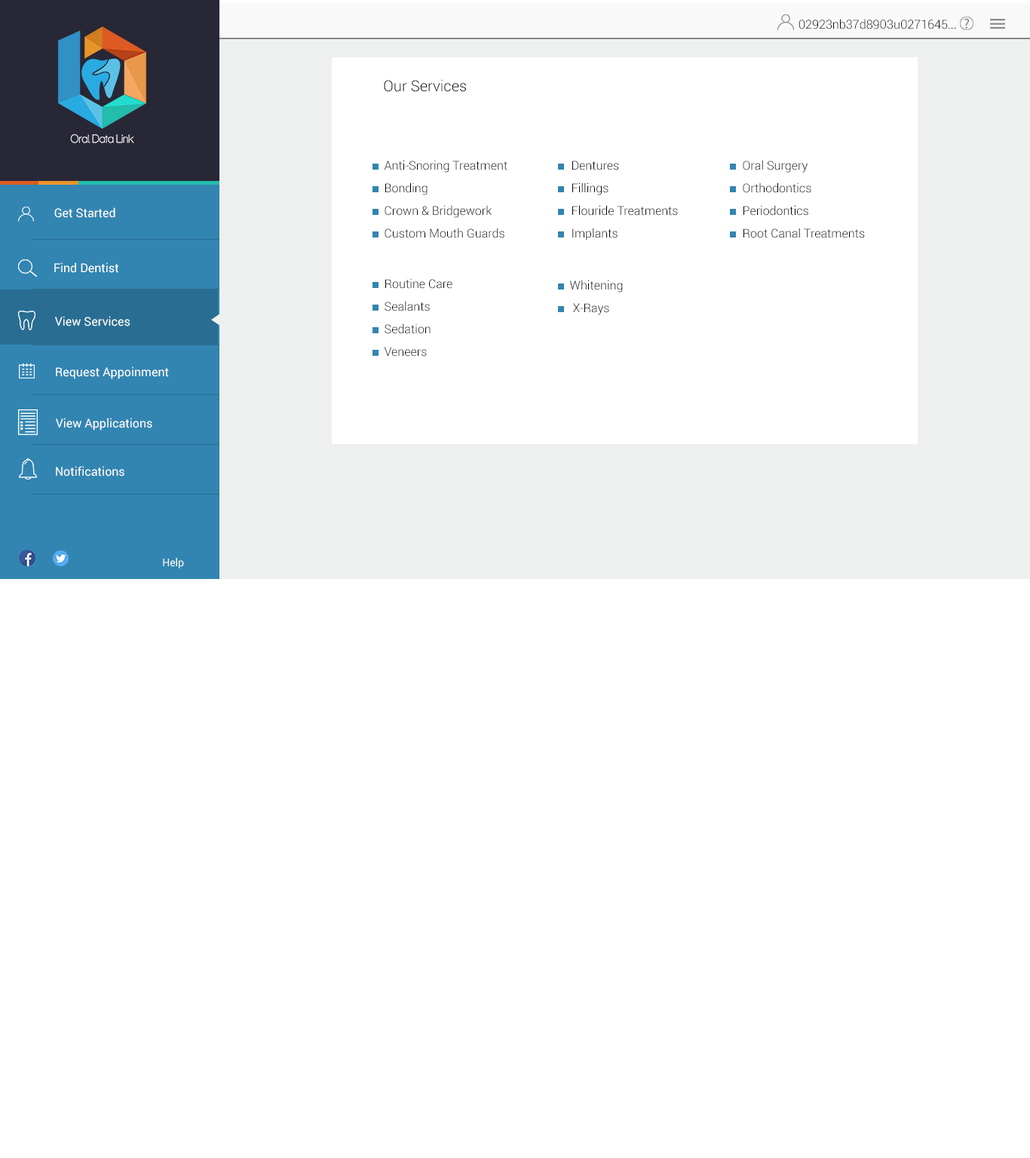
<style>
.page{position:relative;width:1030px;height:1158px;background:#ffffff}
.page>*{position:absolute;margin:0}
.t1{font:12.2px "Roboto-Light";color:#0c0c0c}
.t2{font:15.1px "Roboto-Light";color:#000000}
.t3{font:12.1px/22.6px "Roboto-Light";color:#000000}
.t4{font:12.1px "Roboto-Regular";color:#fefefe}
.t5{font:10.6px "Roboto-Regular";color:#ffffff}
</style>
<div class="page">
<p class="t1" style="left:798px;top:19px;width:158px;height:10px">02923nb37d8903u0271645...</p>
<p class="t2" style="left:384px;top:79px;width:82px;height:13px">Our Services</p>
<p class="t3" style="left:384px;top:160px;width:123px;height:78px">Anti-Snoring Treatment<br>Bonding<br>Crown &amp; Bridgework<br>Custom Mouth Guards</p>
<p class="t3" style="left:572px;top:161px;width:106px;height:79px">Dentures<br>Fillings<br>Flouride Treatments<br>Implants</p>
<p class="t3" style="left:743px;top:160px;width:122px;height:78px">Oral Surgery<br>Orthodontics<br>Periodontics<br>Root Canal Treatments</p>
<p class="t4" style="left:54px;top:207px;width:61px;height:11px">Get Started</p>
<p class="t4" style="left:54px;top:262px;width:64px;height:11px">Find Dentist</p>
<p class="t3" style="left:384px;top:278px;width:68px;height:79px">Routine Care<br>Sealants<br>Sedation<br>Veneers</p>
<p class="t3" style="left:570px;top:280px;width:53px;height:35px">Whitening<br> X-Rays</p>
<p class="t4" style="left:55px;top:316px;width:75px;height:10px">View Services</p>
<p class="t4" style="left:56px;top:366px;width:113px;height:13px">Request Appoinment</p>
<p class="t4" style="left:56px;top:418px;width:96px;height:12px">View Applications</p>
<p class="t4" style="left:56px;top:466px;width:68px;height:10px">Notifications</p>
<p class="t5" style="left:163px;top:558px;width:21px;height:10px">Help</p>
</div>
